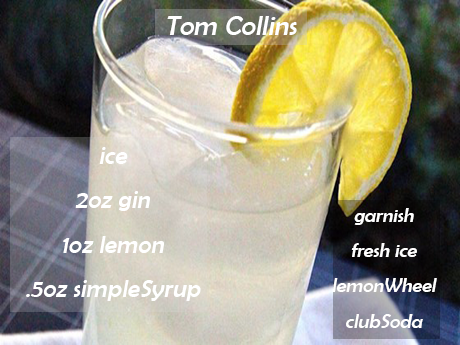
<style>
.page{position:relative;width:460px;height:345px}
.page>*{position:absolute;margin:0}
.t1{font:28.1px "BerlinSansFB-Reg";color:#ffffff;font-style:italic}
.t2{font:25.5px "BerlinSansFB-Reg";color:#ffffff;font-style:italic}
.t3{font:20.1px "BerlinSansFB-Reg";color:#ffffff;font-style:italic}
</style>
<div class="page">
<p class="t1" style="left:167px;top:16px;width:130px;height:19px">Tom Collins</p>
<p class="t2" style="left:26px;top:147px;width:175px;height:154px;text-align:center">ice<br>2oz gin<br>1oz lemon<br>.5oz simpleSyrup</p>
<p class="t3" style="left:332px;top:208px;width:105px;height:120px;text-align:center">garnish<br>fresh ice <br>lemonWheel<br>clubSoda</p>
</div>
